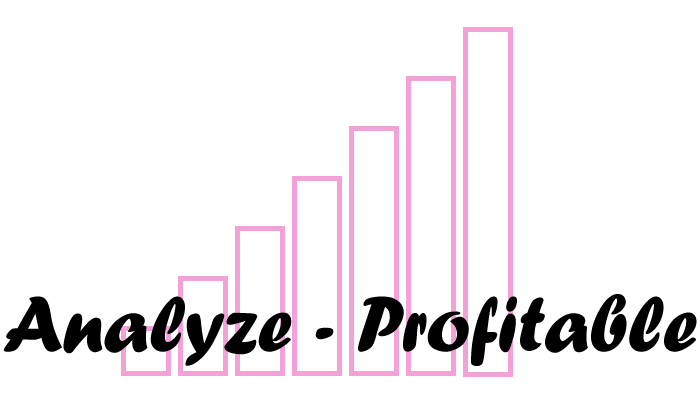
<style>
.page{position:relative;width:700px;height:400px;background:#ffffff}
.page>*{position:absolute;margin:0}
.t1{font:82px "ForteMT";color:#010000}
</style>
<div class="page">
<p class="t1" style="left:3px;top:294px;width:694px;height:72px">Analyze - Profitable</p>
</div>
